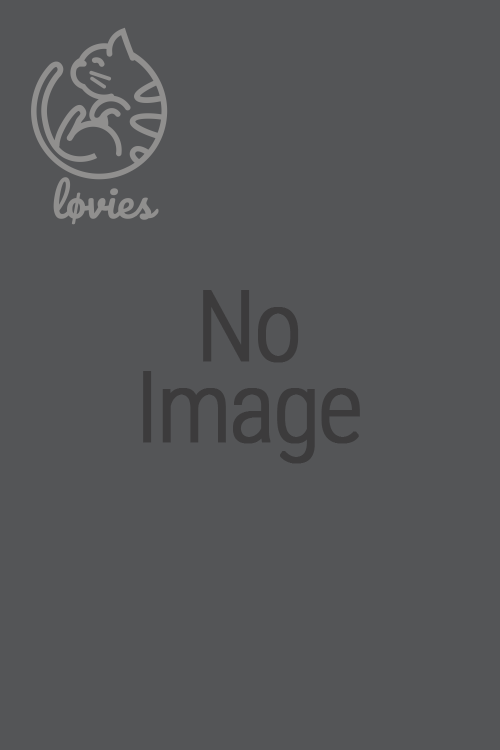
<style>
.page{position:relative;width:500px;height:750px;background:#545557}
.page>*{position:absolute;margin:0}
.t1{font:97.6px/81.3px "RobotoCondensed-Light";letter-spacing:-0.05em;color:#3c3b3c;font-weight:bold}
</style>
<div class="page">
<p class="t1" style="left:143px;top:290px;width:217px;height:174px;text-align:center">No<br>Image</p>
</div>
